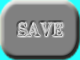
<style>
.page{position:relative;width:80px;height:60px;background:#808080}
.page>*{position:absolute;margin:0}
.t1{font:18px "MyungjoXB-HM"}
</style>
<div class="page">
<p class="t1" style="left:18px;top:22px;width:45px;height:14px">SAVE</p>
</div>
